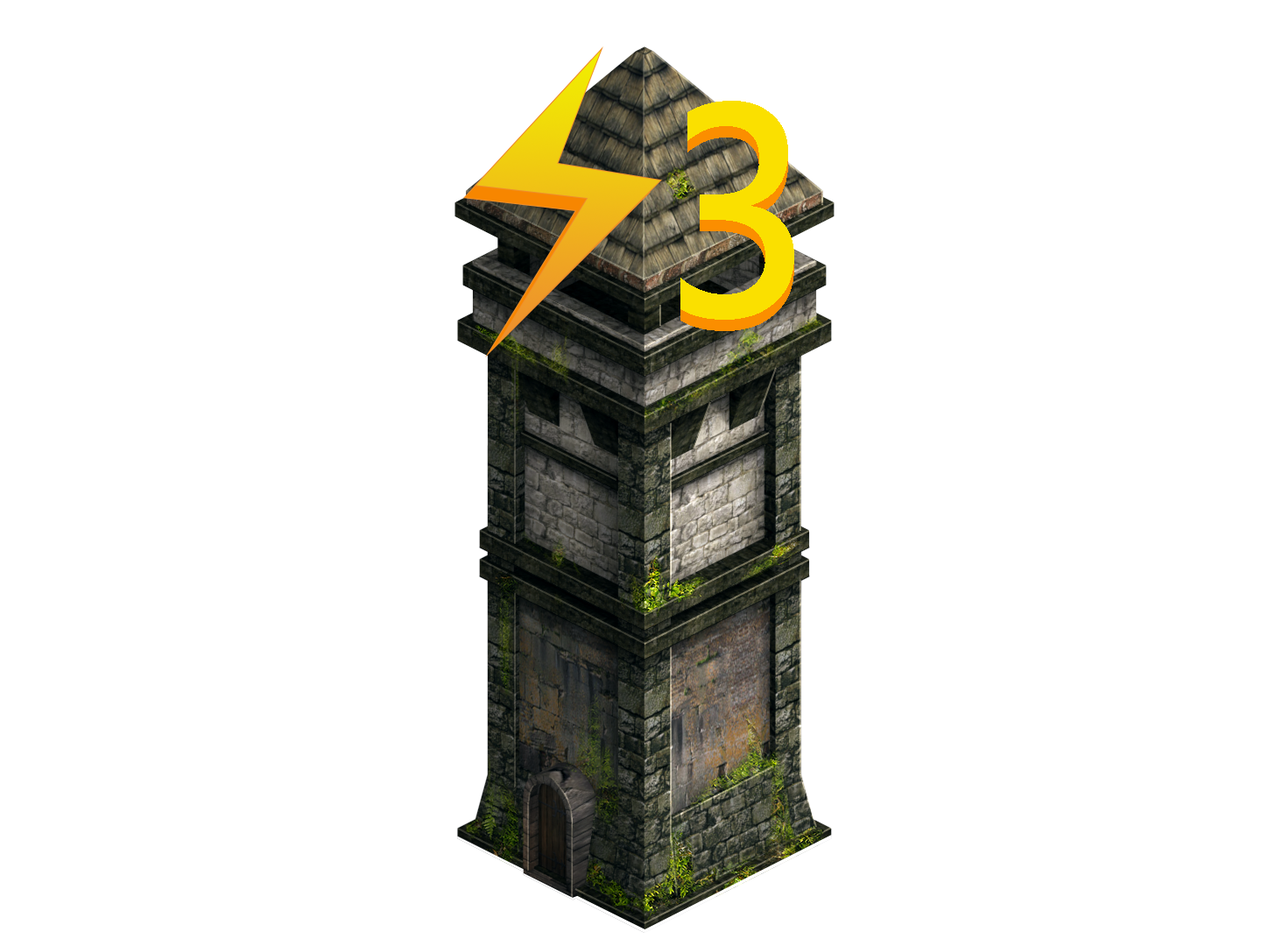
<style>
.page{position:relative;width:1261px;height:946px;background:#ffffff}
.page>*{position:absolute;margin:0}
.t1{font:280.2px "MicrosoftJhengHeiBold";letter-spacing:0.1em;color:#fae000;scale:0.9 1}
</style>
<div class="page">
<p class="t1" style="left:680px;top:101px;width:114px;height:219px">3</p>
<p class="t1" style="left:680px;top:112px;width:114px;height:219px">3</p>
</div>
